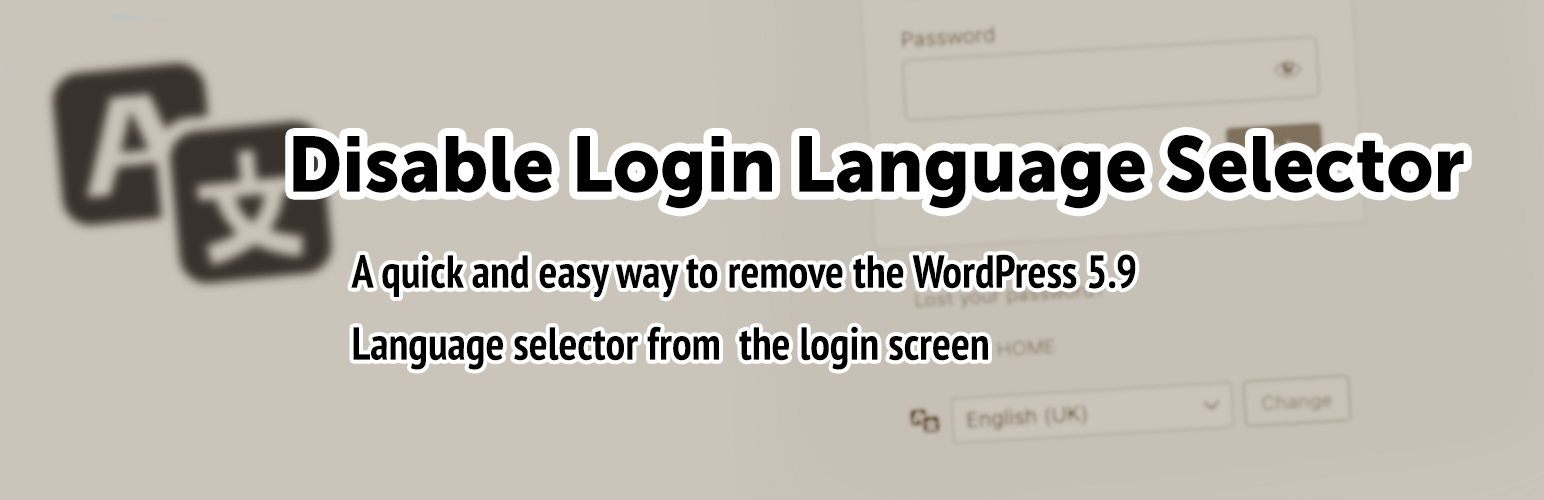
<style>
.page{position:relative;width:1544px;height:500px;background:#cac4bb}
.page>*{position:absolute;margin:0}
.t1{font:78px "MuseoSans-900";color:#000000;scale:0.95 1}
.t2{font:46.5px/72px "PTSans-NarrowBold";color:#000000;scale:0.95 1}
</style>
<div class="page">
<p class="t1" style="left:293px;top:135px;width:1171px;height:74px">Disable Login Language Selector</p>
<p class="t2" style="left:351px;top:254px;width:785px;height:116px">A quick and easy way to remove the WordPress 5.9<br>Language selector from  the login screen</p>
</div>
